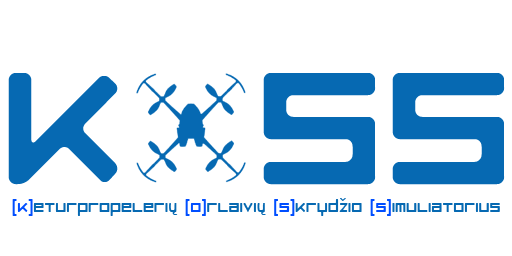
<style>
.page{position:relative;width:512px;height:256px;background:#ffffff}
.page>*{position:absolute;margin:0}
.t1{font:17px "LuggageRoundRegular";color:#0669b2}
.t2{font:17px "LuggageRoundRegular";color:#004eff}
.t3{font:17px "ComicSansMS";color:#0669b2}
</style>
<div class="page">
<p class="t1" style="left:12px;top:198px;width:488px;height:18px"><span class="t2">[K]</span>eturpropeleri<span class="t3">ų </span><span class="t2">[O]</span>rlaivi<span class="t3">ų </span><span class="t2">[S]</span>kryd<span class="t3">ž</span>io <span class="t2">[S]</span>imuliatorius</p>
</div>
